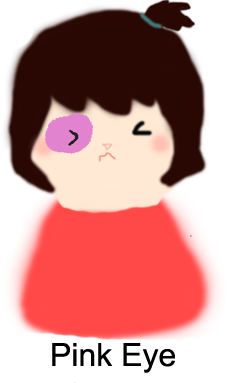
<style>
.page{position:relative;width:228px;height:383px;background:#ffffff}
.page>*{position:absolute;margin:0}
.t1{font:32px "ArialMT";color:#000000}
</style>
<div class="page">
<p class="t1" style="left:52px;top:343px;width:123px;height:30px">Pink Eye</p>
</div>
